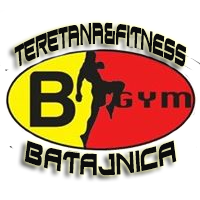
<style>
.page{position:relative;width:200px;height:200px;background:#ffffff}
.page>*{position:absolute;margin:0}
.t1{font:27.4px "Xirod";color:#0c0c0c;scale:0.38 1}
.t2{font:27.7px "Xirod";color:#0c0c0c;scale:0.59 1}
</style>
<div class="page">
<p class="t1" style="left:14px;top:22px;width:173px;height:45px">teretana&amp;FITNESS</p>
<p class="t2" style="left:24px;top:140px;width:153px;height:36px">BATAJNICA</p>
</div>
